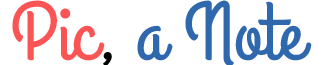
<style>
.page{position:relative;width:323px;height:65px;background:#ffffff}
.page>*{position:absolute;margin:0}
.t1{font:82px "GrandHotel-Regular";color:#3068ae}
.t2{font:82px "GrandHotel-Regular";color:#fb5454}
.t3{font:82px "GrandHotel-Regular";color:#000000}
</style>
<div class="page">
<p class="t1" style="left:12px;top:0px;width:300px;height:66px"><span class="t2">Pic</span><span class="t3">, </span>a Note</p>
</div>
